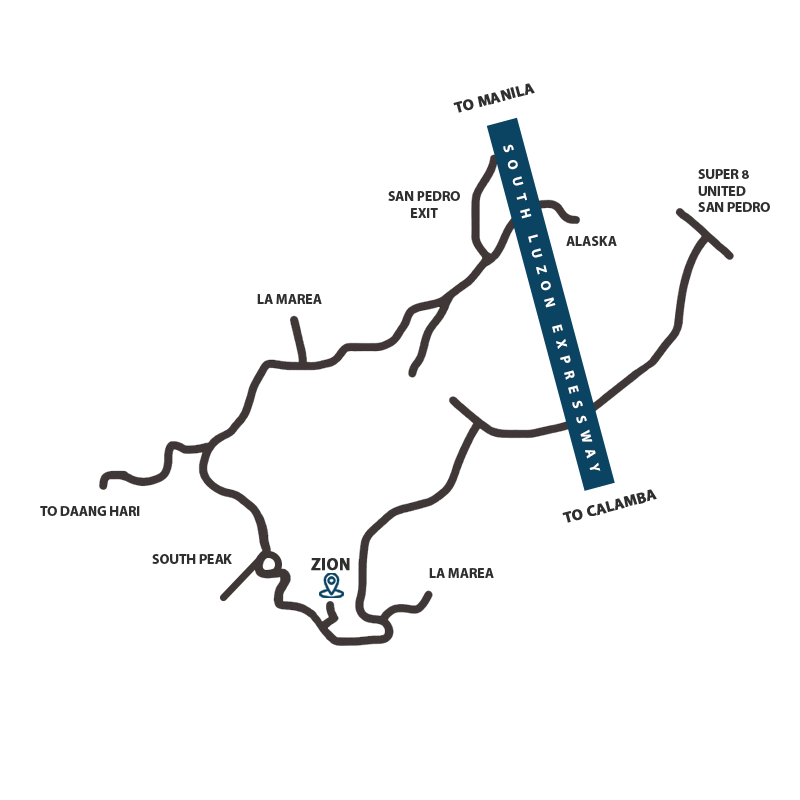
<style>
.page{position:relative;width:800px;height:800px;background:#ffffff}
.page>*{position:absolute;margin:0}
.t1{font:15.3px "MyriadPro-Bold";color:#2f2f2f;font-weight:bold}
.t2{font:13.9px "MyriadPro-Bold";color:#2f2f2f}
.t3{font:16.7px "MyriadPro-Bold";color:#2f2f2f;font-weight:bold}
</style>
<div class="page">
<p class="t1" style="left:453px;top:83px;width:82px;height:30px;rotate:-15deg">TO MANILA</p>
<p class="t2" style="left:698px;top:169px;width:72px;height:43px">SUPER 8<br>UNITED <br>SAN PEDRO</p>
<p class="t2" style="left:388px;top:191px;width:72px;height:27px;text-align:center">SAN PEDRO<br>EXIT</p>
<p class="t2" style="left:566px;top:236px;width:51px;height:10px">ALASKA</p>
<p class="t2" style="left:257px;top:294px;width:65px;height:10px">LA MAREA</p>
<p class="t1" style="left:562px;top:489px;width:95px;height:34px;rotate:-15deg">TO CALAMBA</p>
<p class="t2" style="left:40px;top:506px;width:100px;height:10px">TO DAANG HARI</p>
<p class="t2" style="left:152px;top:554px;width:80px;height:10px">SOUTH PEAK</p>
<p class="t3" style="left:311px;top:558px;width:39px;height:13px">ZION</p>
<p class="t2" style="left:429px;top:568px;width:65px;height:10px">LA MAREA</p>
</div>
